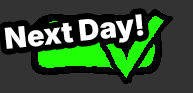
<style>
.page{position:relative;width:193px;height:93px;background:#333333}
.page>*{position:absolute;margin:0}
.t1{font:28.9px "Inter-Black";color:#ffffff}
</style>
<div class="page">
<p class="t1" style="left:4px;top:14px;width:140px;height:35px;rotate:-6deg">Next Day!</p>
</div>
